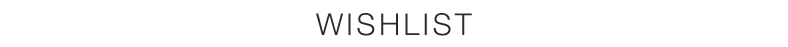
<style>
.page{position:relative;width:788px;height:47px;background:#ffffff}
.page>*{position:absolute;margin:0}
.t1{font:30px "HelveticaNeue-Light";letter-spacing:0.11em;color:#2a2a2a}
</style>
<div class="page">
<p class="t1" style="left:316px;top:13px;width:156px;height:23px">WISHLIST</p>
</div>
